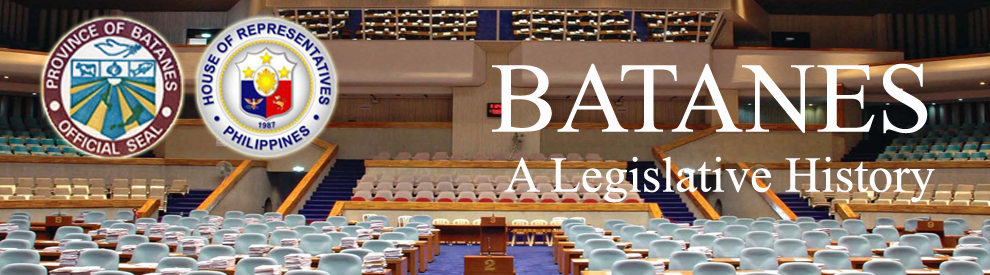
<style>
.page{position:relative;width:990px;height:275px}
.page>*{position:absolute;margin:0}
.t1{font:50px "TimesNewRomanPSMT";color:#fdfcfc}
.t2{font:100px "TimesNewRomanPSMT";color:#fdfdfd}
</style>
<div class="page">
<p class="t1" style="left:492px;top:63px;width:443px;height:140px;text-align:center"><span class="t2">BATANES<br></span>A Legislative History</p>
</div>
